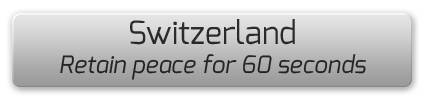
<style>
.page{position:relative;width:425px;height:100px}
.page>*{position:absolute;margin:0}
.t1{font:24px "Exo-Italic";color:#282828}
.t2{font:32px "Exo-Regular";color:#282828}
</style>
<div class="page">
<p class="t1" style="left:60px;top:19px;width:306px;height:61px;text-align:center"><span class="t2">Switzerland<br></span>Retain peace for 60 seconds</p>
</div>
